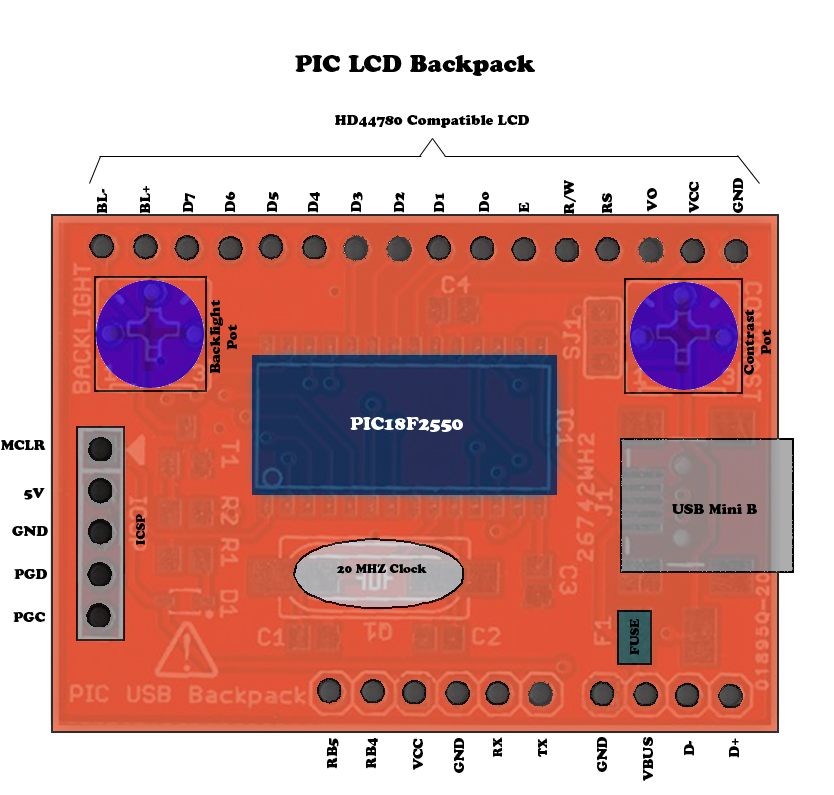
<style>
.page{position:relative;width:834px;height:795px;background:#ffffff}
.page>*{position:absolute;margin:0}
.t1{font:24px "CooperBlackStd";color:#000000}
.t2{font:14px "CooperBlackStd";color:#000000}
.t3{font:18px "CooperBlackStd";color:#ffffff}
.t4{font:12px "CooperBlackStd";color:#000000}
</style>
<div class="page">
<p class="t1" style="left:295px;top:55px;width:240px;height:21px">PIC LCD Backpack</p>
<p class="t2" style="left:335px;top:115px;width:194px;height:13px">HD44780 Compatible LCD</p>
<p class="t2" style="left:564px;top:180px;width:12px;height:34px;rotate:-90deg">R/W</p>
<p class="t2" style="left:689px;top:181px;width:10px;height:32px;rotate:-90deg">VCC</p>
<p class="t2" style="left:733px;top:178px;width:10px;height:35px;rotate:-90deg">GND</p>
<p class="t2" style="left:97px;top:188px;width:10px;height:26px;rotate:-90deg">BL-</p>
<p class="t2" style="left:140px;top:186px;width:10px;height:28px;rotate:-90deg">BL+</p>
<p class="t2" style="left:183px;top:193px;width:12px;height:20px;rotate:-90deg">D7</p>
<p class="t2" style="left:225px;top:191px;width:10px;height:22px;rotate:-90deg">D6</p>
<p class="t2" style="left:267px;top:192px;width:12px;height:21px;rotate:-90deg">D5</p>
<p class="t2" style="left:308px;top:192px;width:12px;height:21px;rotate:-90deg">D4</p>
<p class="t2" style="left:351px;top:192px;width:12px;height:21px;rotate:-90deg">D3</p>
<p class="t2" style="left:394px;top:192px;width:11px;height:21px;rotate:-90deg">D2</p>
<p class="t2" style="left:434px;top:192px;width:10px;height:21px;rotate:-90deg">D1</p>
<p class="t2" style="left:479px;top:191px;width:10px;height:22px;rotate:-90deg">Do</p>
<p class="t2" style="left:602px;top:193px;width:10px;height:21px;rotate:-90deg">RS</p>
<p class="t2" style="left:647px;top:188px;width:10px;height:24px;rotate:-90deg">VO</p>
<p class="t2" style="left:518px;top:202px;width:11px;height:11px;rotate:-90deg">E</p>
<p class="t2" style="left:210px;top:299px;width:27px;height:75px;text-align:center;rotate:-90deg">Backlight<br>Pot</p>
<p class="t2" style="left:744px;top:309px;width:27px;height:66px;text-align:center;rotate:-90deg">Contrast<br>Pot</p>
<p class="t3" style="left:350px;top:417px;width:113px;height:15px">PIC18F2550</p>
<p class="t2" style="left:1px;top:440px;width:45px;height:10px">MCLR</p>
<p class="t2" style="left:24px;top:488px;width:21px;height:12px">5V</p>
<p class="t2" style="left:672px;top:504px;width:85px;height:10px">USB Mini B</p>
<p class="t4" style="left:136px;top:514px;width:9px;height:31px;rotate:-90deg">ICSP</p>
<p class="t2" style="left:12px;top:526px;width:36px;height:10px">GND</p>
<p class="t2" style="left:14px;top:569px;width:33px;height:10px">PGD</p>
<p class="t4" style="left:337px;top:564px;width:90px;height:10px">20 MHZ Clock</p>
<p class="t2" style="left:13px;top:612px;width:32px;height:10px">PGC</p>
<p class="t4" style="left:629px;top:618px;width:10px;height:37px;rotate:-90deg">FUSE</p>
<p class="t4" style="left:493px;top:737px;width:9px;height:20px;rotate:-90deg">RX</p>
<p class="t2" style="left:597px;top:737px;width:10px;height:35px;rotate:-90deg">GND</p>
<p class="t2" style="left:643px;top:737px;width:10px;height:44px;rotate:-90deg">VBUS</p>
<p class="t2" style="left:327px;top:738px;width:12px;height:31px;rotate:-90deg">RB5</p>
<p class="t2" style="left:366px;top:738px;width:12px;height:31px;rotate:-90deg">RB4</p>
<p class="t2" style="left:413px;top:738px;width:10px;height:32px;rotate:-90deg">VCC</p>
<p class="t2" style="left:454px;top:738px;width:10px;height:35px;rotate:-90deg">GND</p>
<p class="t4" style="left:538px;top:738px;width:9px;height:19px;rotate:-90deg">TX</p>
<p class="t2" style="left:684px;top:740px;width:10px;height:16px;rotate:-90deg">D-</p>
<p class="t2" style="left:729px;top:738px;width:10px;height:20px;rotate:-90deg">D+</p>
</div>
